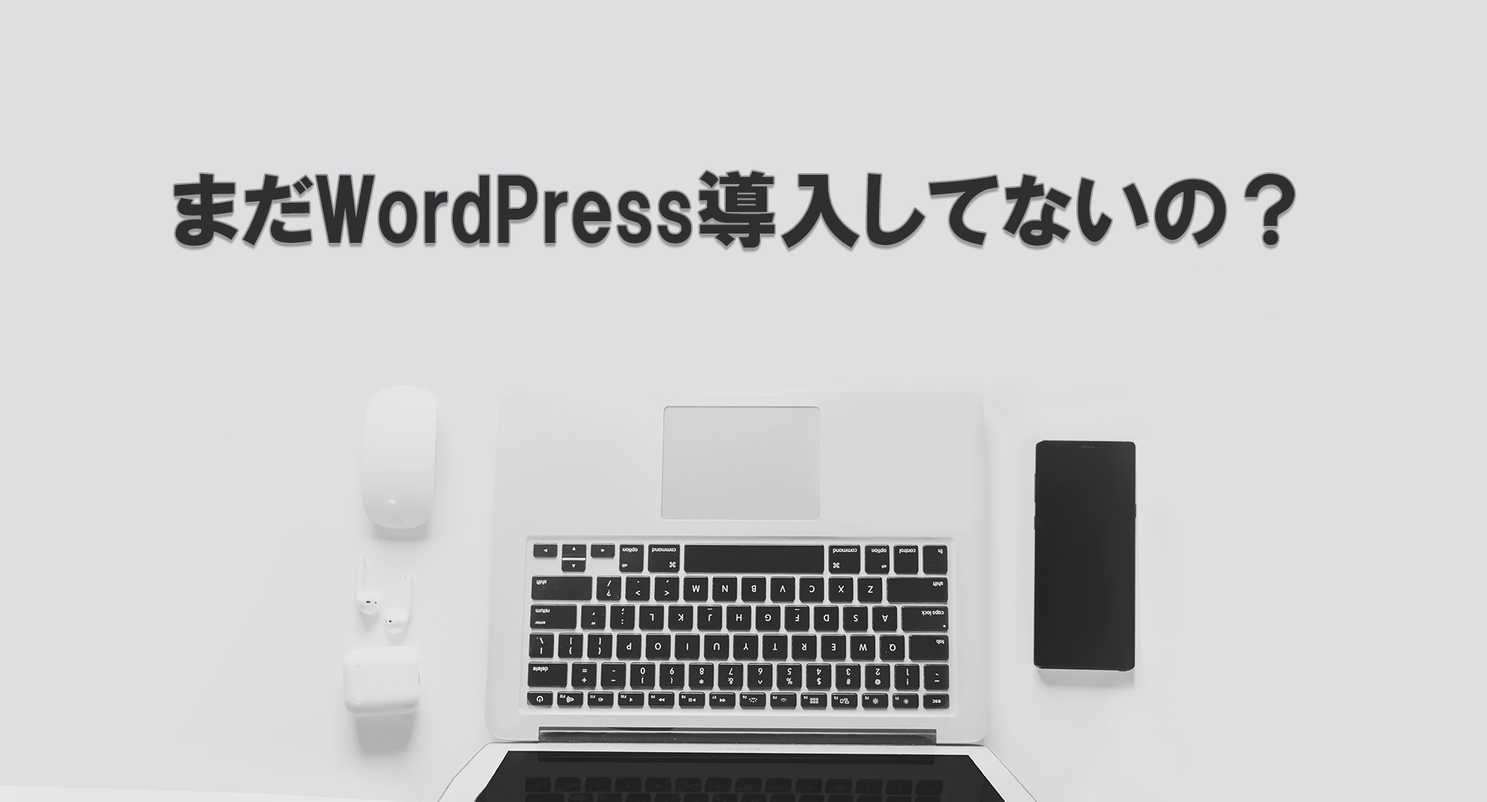
<style>
.page{position:relative;width:1487px;height:802px;background:#dedfe1}
.page>*{position:absolute;margin:0}
.t1{font:83.5px "HGPSoeiKakugothicUB";color:#2e2f31}
</style>
<div class="page">
<p class="t1" style="left:174px;top:171px;width:1121px;height:77px">まだWordPress導入してないの？</p>
</div>
